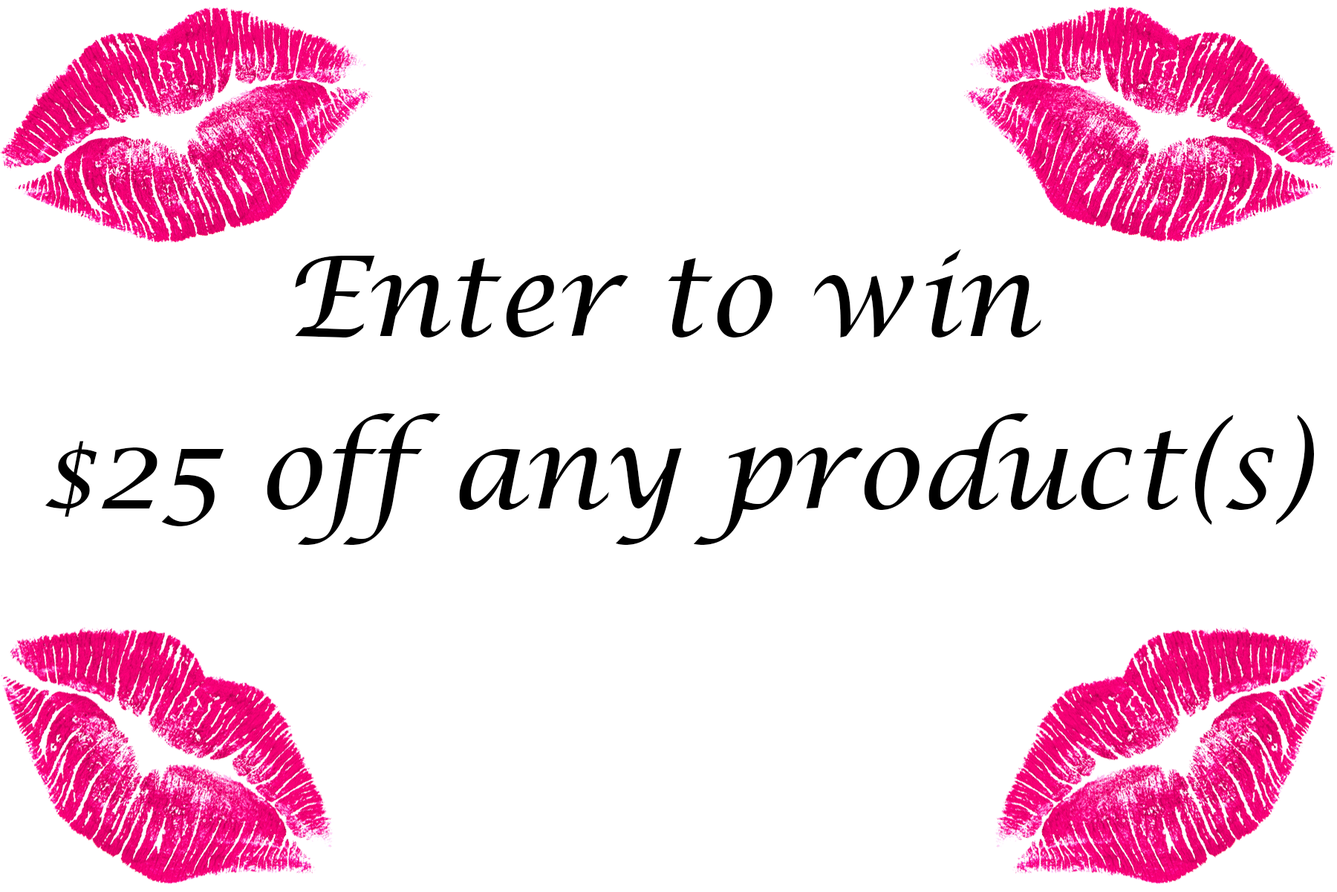
<style>
.page{position:relative;width:1337px;height:892px;background:#ffffff}
.page>*{position:absolute;margin:0}
.t1{font:111.5px "LucidaCalligraphy-Italic";color:#000000}
</style>
<div class="page">
<p class="t1" style="left:295px;top:249px;width:747px;height:88px">Enter to win</p>
<p class="t1" style="left:45px;top:413px;width:1269px;height:132px">$25 off any product(s)</p>
</div>
